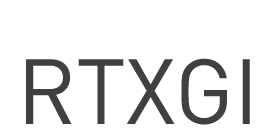
<style>
.page{position:relative;width:280px;height:140px;background:#ffffff}
.page>*{position:absolute;margin:0}
.t1{font:90.5px "DINPro-Regular";color:#404040;text-transform:uppercase}
</style>
<div class="page">
<p class="t1" style="left:26px;top:58px;width:224px;height:67px">RTXGI</p>
</div>
